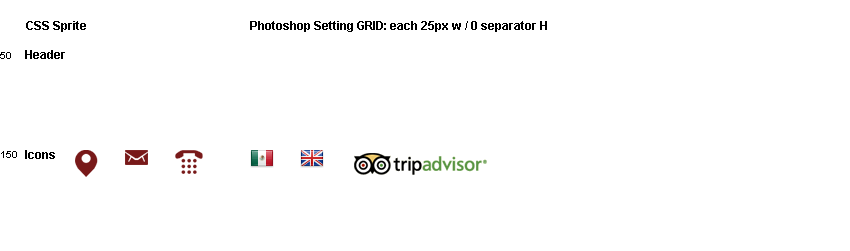
<style>
.page{position:relative;width:850px;height:251px;background:#ffffff}
.page>*{position:absolute;margin:0}
.t1{font:12px "Arial-BoldMT";color:#000000}
.t2{font:10px "ArialMT";color:#000000}
</style>
<div class="page">
<p class="t1" style="left:26px;top:21px;width:60px;height:11px">CSS Sprite</p>
<p class="t1" style="left:250px;top:21px;width:297px;height:11px">Photoshop Setting GRID: each 25px w / 0 separator H</p>
<p class="t2" style="left:0px;top:52px;width:11px;height:7px">50</p>
<p class="t1" style="left:25px;top:50px;width:40px;height:9px">Header</p>
<p class="t1" style="left:25px;top:150px;width:30px;height:9px">Icons</p>
<p class="t2" style="left:1px;top:151px;width:16px;height:7px">150</p>
</div>
